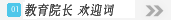
<style>
.page{position:relative;width:171px;height:20px;background:#ffffff}
.page>*{position:absolute;margin:0}
.t1{font:14px "Haansoft-Batang";color:#333333;font-weight:bold;font-style:italic;scale:0.85 1}
</style>
<div class="page">
<p class="t1" style="left:25px;top:3px;width:89px;height:14px">教育院长 欢迎词</p>
</div>
